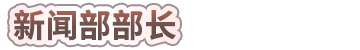
<style>
.page{position:relative;width:360px;height:50px;background:#ffffff}
.page>*{position:absolute;margin:0}
.t1{font:32px "SourceHanSansSC-Bold";color:#73534d;font-weight:bold}
</style>
<div class="page">
<p class="t1" style="left:13px;top:9px;width:163px;height:32px">新闻部部长</p>
</div>
